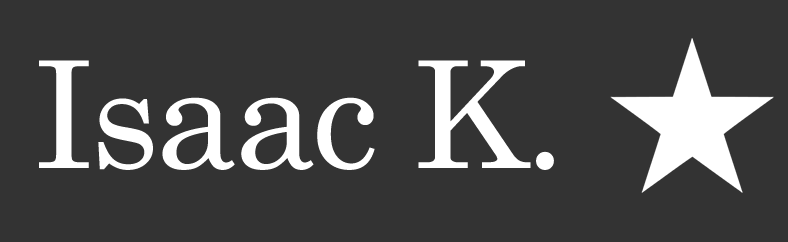
<style>
.page{position:relative;width:788px;height:242px;background:#333333}
.page>*{position:absolute;margin:0}
.t1{font:148.4px "Century";letter-spacing:-0.025em;color:#ffffff}
</style>
<div class="page">
<p class="t1" style="left:39px;top:60px;width:515px;height:110px">Isaac K.</p>
</div>
